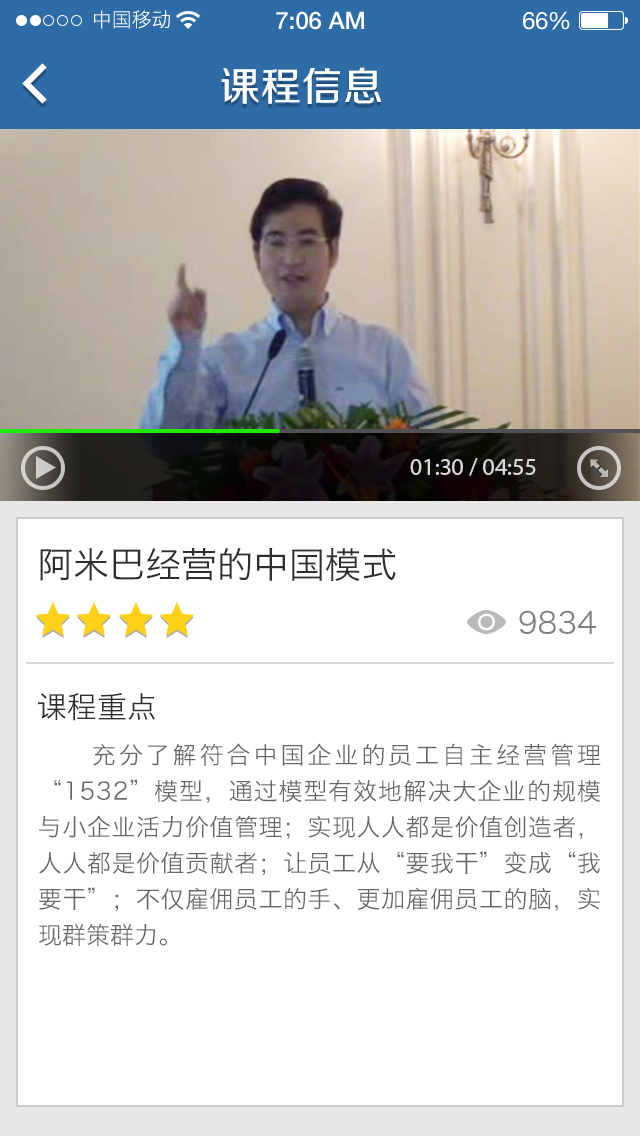
<style>
.page{position:relative;width:640px;height:1136px;background:#ffffff}
.page>*{position:absolute;margin:0}
.t1{font:20px "HiraginoSansGB-W3";color:#ffffff}
.t2{font:24px "HelveticaNeue-Medium";color:#ffffff}
.t3{font:24px "HelveticaNeue";color:#ffffff}
.t4{font:24px "HelveticaNeue";letter-spacing:-0.02em;color:#ffffff}
.t5{font:40px "FZZZHUNHJW--GB1-0";letter-spacing:0.025em;color:#ffffff}
.t6{font:24px "MyriadPro-Regular";color:#dadada}
.t7{font:36px "HiraginoSansGB-W3";color:#2e2e2e}
.t8{font:30px "HiraginoSansGB-W3";color:#808080}
.t9{font:30px "HiraginoSansGB-W3";color:#2e2e2e}
.t10{font:24px/36px "HiraginoSansGB-W3";color:#666666}
</style>
<div class="page">
<p class="t1" style="left:94px;top:10px;width:76px;height:19px">中国移动</p>
<p class="t2" style="left:276px;top:11px;width:88px;height:19px">7:06 AM</p>
<p class="t3" style="left:523px;top:11px;width:47px;height:19px">6<span class="t4">6</span>%</p>
<p class="t5" style="left:221px;top:67px;width:160px;height:37px">课程信息</p>
<p class="t6" style="left:410px;top:458px;width:126px;height:18px">01:30 / 04:55</p>
<p class="t7" style="left:40px;top:548px;width:356px;height:33px">阿米巴经营的中国模式</p>
<p class="t8" style="left:519px;top:610px;width:77px;height:24px">9834</p>
<p class="t9" style="left:38px;top:693px;width:117px;height:28px">课程重点</p>
<p class="t10" style="left:39px;top:743px;width:562px;height:203px;text-align:justify">充分了解符合中国企业的员工自主经营管理“1532”模型，通过模型有效地解决大企业的规模与小企业活力价值管理；实现人人都是价值创造者，人人都是价值贡献者；让员工从“要我干”变成“我要干”；不仅雇佣员工的手、更加雇佣员工的脑，实现群策群力。</p>
</div>
